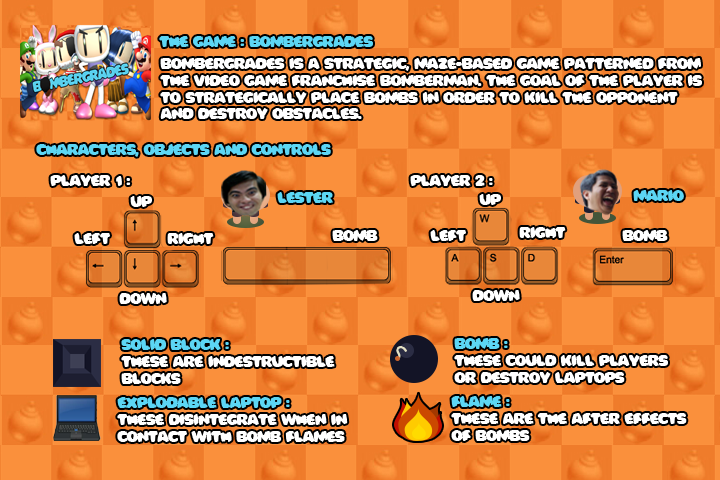
<style>
.page{position:relative;width:720px;height:480px;background:#fa903c}
.page>*{position:absolute;margin:0}
.t1{font:14px "Bomberman";letter-spacing:-0.025em;color:#5cd6f4}
.t2{font:14px "Bomberman";letter-spacing:-0.025em;color:#ffffff}
</style>
<div class="page">
<p class="t1" style="left:159px;top:36px;width:214px;height:11px">The game : bombergrades</p>
<p class="t2" style="left:160px;top:58px;width:542px;height:61px">Bombergrades is a strategic, maze-based game patterned from <br>the video game franchise Bomberman. The goal of the player is <br>to strategically place bombs in order to kill the opponent <br>and destroy obstacles.</p>
<p class="t1" style="left:36px;top:144px;width:295px;height:13px">characters, objects and controls</p>
<p class="t2" style="left:50px;top:175px;width:81px;height:11px">player 1 :</p>
<p class="t2" style="left:410px;top:175px;width:83px;height:11px">player 2 :</p>
<p class="t2" style="left:130px;top:196px;width:22px;height:11px">up</p>
<p class="t1" style="left:277px;top:192px;width:56px;height:11px">lester</p>
<p class="t2" style="left:479px;top:194px;width:22px;height:11px">up</p>
<p class="t1" style="left:633px;top:190px;width:51px;height:11px">mario</p>
<p class="t2" style="left:74px;top:233px;width:36px;height:11px">left</p>
<p class="t2" style="left:167px;top:233px;width:47px;height:11px">right</p>
<p class="t2" style="left:332px;top:230px;width:46px;height:11px">bomb</p>
<p class="t2" style="left:430px;top:230px;width:36px;height:11px">left</p>
<p class="t2" style="left:519px;top:227px;width:47px;height:11px">right</p>
<p class="t2" style="left:622px;top:230px;width:46px;height:11px">bomb</p>
<p class="t2" style="left:119px;top:293px;width:48px;height:11px">down</p>
<p class="t2" style="left:472px;top:290px;width:48px;height:11px">down</p>
<p class="t2" style="left:121px;top:339px;width:214px;height:45px"><span class="t1">Solid Block : <br></span>these are indestructible<br>blocks</p>
<p class="t2" style="left:454px;top:338px;width:214px;height:45px"><span class="t1">bomb :<br></span>these could kill players<br>or destroy laptops</p>
<p class="t2" style="left:117px;top:397px;width:231px;height:45px"><span class="t1">explodable laptop :<br></span>these disintegrate when in<br>contact with bomb flames</p>
<p class="t2" style="left:451px;top:396px;width:236px;height:45px"><span class="t1">flame : <br></span>these are the after effects<br>of bombs</p>
</div>
